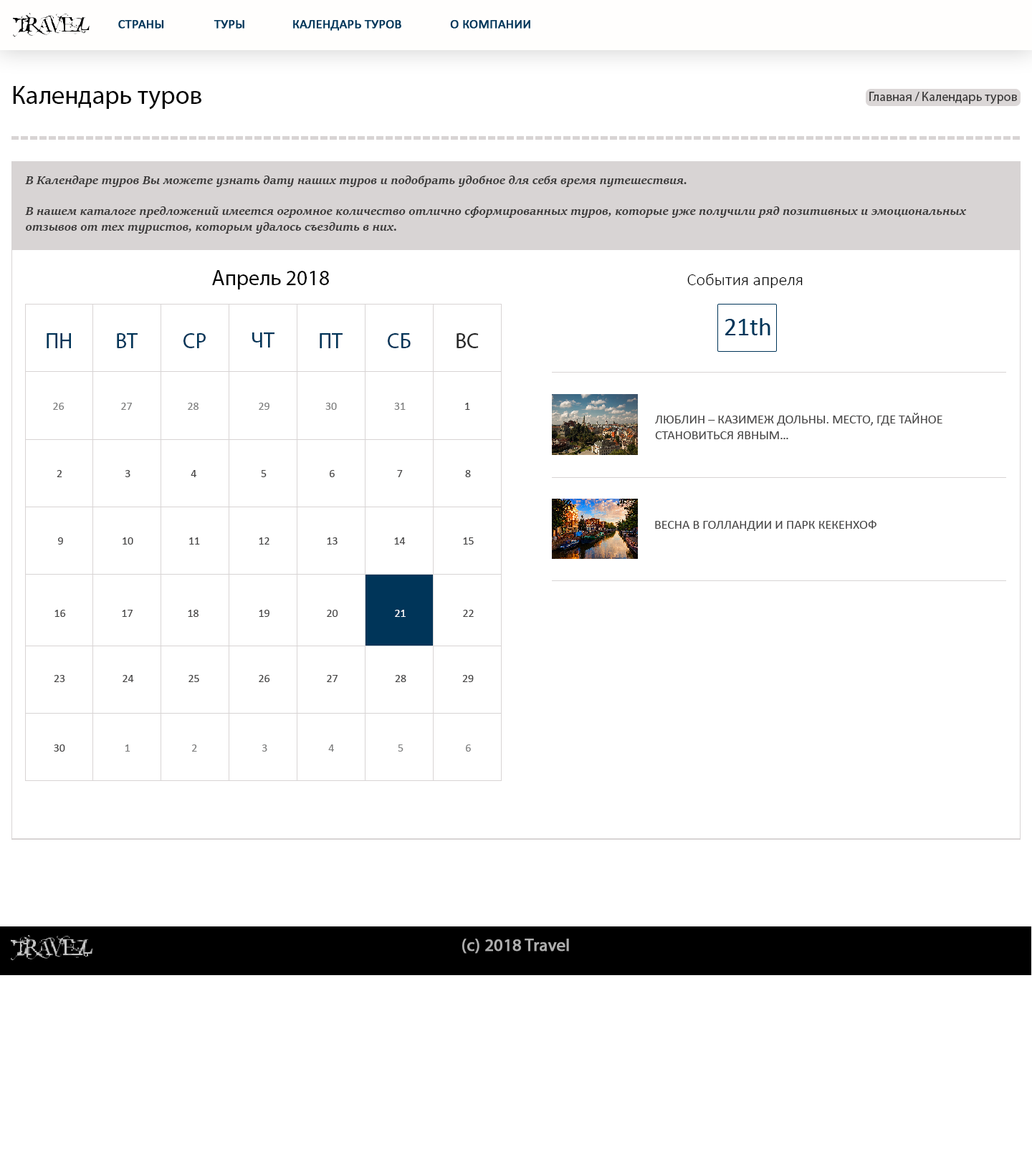
<style>
.page{position:relative;width:1032px;height:1155px;background:#ffffff}
.page>*{position:absolute;margin:0}
.t1{font:25.8px "MyriadPro-Regular";color:#030303}
.t2{font:12.9px "MyriadPro-Regular";color:#3b3a3a}
.t3{font:12.9px "SitkaHeading-BoldItalic";color:#3b3a3a}
.t4{font:21.5px "MyriadPro-Regular";color:#020202}
.t5{font:17.2px "Calibri-Light";color:#020202}
.t6{font:21.5px "MyriadPro-Regular";color:#003559}
.t7{font:21.5px "MyriadPro-Regular";color:#292929}
.t8{font:11.5px "Calibri";color:#7f8080}
.t9{font:11.5px "Calibri";color:#464545}
.t10{font:11.5px "Calibri";color:#f9fafb}
</style>
<div class="page">
<p class="t1" style="left:13px;top:86px;width:188px;height:24px">Календарь туров</p>
<p class="t2" style="left:869px;top:92px;width:148px;height:12px">Главная / Календарь туров</p>
<p class="t3" style="left:25px;top:176px;width:941px;height:58px">В Календаре туров Вы можете узнать дату наших туров и подобрать удобное для себя время путешествия.<br><br>В нашем каталоге предложений имеется огромное количество отлично сформированных туров, которые уже получили ряд позитивных и эмоциональных <br>отзывов от тех туристов, которым удалось съездить в них.</p>
<p class="t4" style="left:212px;top:270px;width:117px;height:20px">Апрель 2018</p>
<p class="t5" style="left:687px;top:274px;width:116px;height:14px">События апреля</p>
<p class="t6" style="left:47px;top:333px;width:24px;height:15px">ПН</p>
<p class="t6" style="left:117px;top:333px;width:21px;height:15px">ВТ</p>
<p class="t6" style="left:183px;top:333px;width:23px;height:15px">СР</p>
<p class="t6" style="left:252px;top:333px;width:23px;height:15px">ЧТ</p>
<p class="t6" style="left:320px;top:333px;width:23px;height:15px">ПТ</p>
<p class="t6" style="left:388px;top:333px;width:23px;height:15px">СБ</p>
<p class="t7" style="left:457px;top:333px;width:22px;height:15px">ВС</p>
<p class="t8" style="left:53px;top:403px;width:12px;height:7px">26</p>
<p class="t8" style="left:121px;top:403px;width:11px;height:7px">27</p>
<p class="t8" style="left:188px;top:403px;width:11px;height:7px">28</p>
<p class="t8" style="left:259px;top:403px;width:10px;height:7px">29</p>
<p class="t8" style="left:325px;top:403px;width:12px;height:7px">30</p>
<p class="t8" style="left:394px;top:403px;width:12px;height:7px">31</p>
<p class="t9" style="left:465px;top:403px;width:5px;height:7px">1</p>
<p class="t9" style="left:57px;top:470px;width:5px;height:7px">2</p>
<p class="t9" style="left:125px;top:470px;width:5px;height:7px">3</p>
<p class="t9" style="left:191px;top:470px;width:5px;height:7px">4</p>
<p class="t9" style="left:261px;top:470px;width:6px;height:7px">5</p>
<p class="t9" style="left:330px;top:470px;width:5px;height:7px">6</p>
<p class="t9" style="left:397px;top:470px;width:6px;height:7px">7</p>
<p class="t9" style="left:465px;top:470px;width:6px;height:7px">8</p>
<p class="t9" style="left:58px;top:538px;width:5px;height:7px">9</p>
<p class="t9" style="left:123px;top:538px;width:10px;height:7px">10</p>
<p class="t9" style="left:189px;top:538px;width:11px;height:7px">11</p>
<p class="t9" style="left:259px;top:538px;width:10px;height:7px">12</p>
<p class="t9" style="left:327px;top:538px;width:11px;height:7px">13</p>
<p class="t9" style="left:394px;top:538px;width:12px;height:7px">14</p>
<p class="t9" style="left:463px;top:538px;width:11px;height:7px">15</p>
<p class="t9" style="left:54px;top:610px;width:12px;height:7px">16</p>
<p class="t9" style="left:122px;top:610px;width:11px;height:7px">17</p>
<p class="t9" style="left:188px;top:610px;width:11px;height:7px">18</p>
<p class="t9" style="left:259px;top:610px;width:10px;height:7px">19</p>
<p class="t9" style="left:327px;top:610px;width:11px;height:7px">20</p>
<p class="t10" style="left:395px;top:610px;width:11px;height:7px">21</p>
<p class="t9" style="left:463px;top:610px;width:11px;height:7px">22</p>
<p class="t9" style="left:54px;top:675px;width:11px;height:7px">23</p>
<p class="t9" style="left:123px;top:675px;width:11px;height:7px">24</p>
<p class="t9" style="left:188px;top:675px;width:11px;height:7px">25</p>
<p class="t9" style="left:259px;top:675px;width:11px;height:7px">26</p>
<p class="t9" style="left:327px;top:675px;width:11px;height:7px">27</p>
<p class="t9" style="left:395px;top:675px;width:11px;height:7px">28</p>
<p class="t9" style="left:462px;top:675px;width:12px;height:7px">29</p>
<p class="t9" style="left:54px;top:745px;width:11px;height:7px">30</p>
<p class="t8" style="left:125px;top:745px;width:5px;height:7px">1</p>
<p class="t8" style="left:192px;top:745px;width:5px;height:7px">2</p>
<p class="t8" style="left:262px;top:745px;width:5px;height:7px">3</p>
<p class="t8" style="left:328px;top:745px;width:6px;height:7px">4</p>
<p class="t8" style="left:398px;top:745px;width:6px;height:7px">5</p>
<p class="t8" style="left:466px;top:745px;width:5px;height:7px">6</p>
</div>
